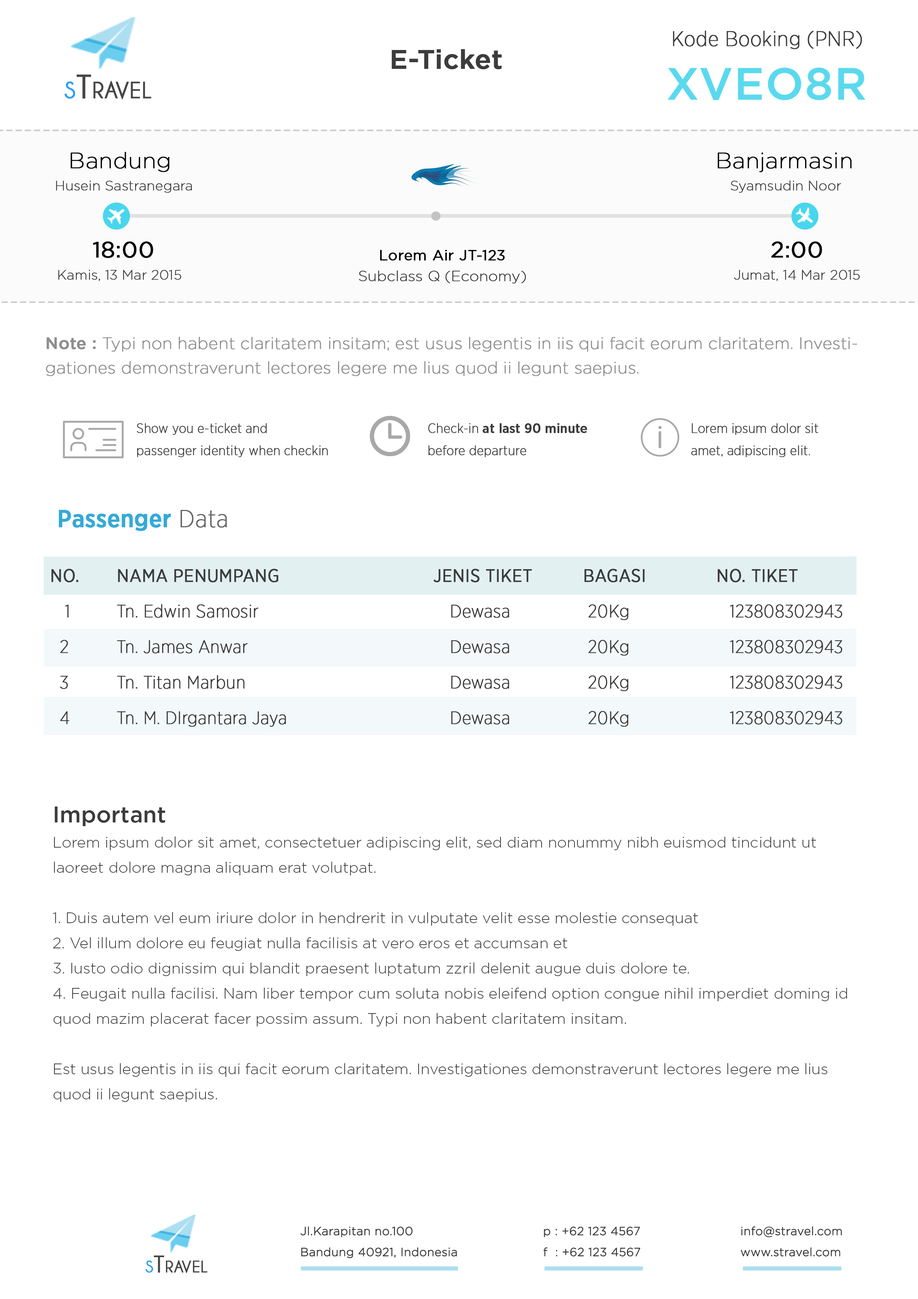
<style>
.page{position:relative;width:918px;height:1299px;background:#ffffff}
.page>*{position:absolute;margin:0}
.t1{font:20.9px/26.9px "GothamNarrow-XLight";color:#3c3c3c;font-weight:bold}
.t2{font:44.8px/53.7px "Gotham-Medium";color:#5ad9ee;font-weight:bold}
.t3{font:26.7px "Gotham-Medium";color:#3c3c3c;font-weight:bold}
.t4{font:31.8px "CaviarDreams-Bold";color:#464646;font-variant:small-caps;font-weight:bold}
.t5{font:31.8px "CaviarDreams-Bold";color:#2da0f1;font-variant:small-caps;font-weight:bold}
.t6{font:13.3px/22.2px "Gotham-ExtraLight";color:#3c3c3c;font-weight:bold}
.t7{font:22.2px/24.5px "Gotham-ExtraLight";color:#000000;font-weight:bold}
.t8{font:22.2px/30.6px "Gotham-Book";color:#000000;font-weight:bold}
.t9{font:22.2px/22.2px "Gotham-Book";color:#000000;font-weight:bold}
.t10{font:14.4px/20.7px "Gotham-ExtraLight";color:#3c3c3c;font-weight:bold}
.t11{font:14.4px/20.7px "Gotham-Book";color:#000000;font-weight:bold}
.t12{font:16.2px/24.2px "Gotham-ExtraLight";color:#8e8e8e;font-weight:bold}
.t13{font:16.2px/24.2px "Gotham-Medium";color:#8e8e8e;font-weight:bold}
.t14{font:13.3px/22.2px "GothamNarrow-XLight";color:#3c3c3c;font-weight:bold}
.t15{font:13.3px/22.2px "GothamNarrow-Medium";color:#3c3c3c;font-weight:bold}
.t16{font:24.4px "GothamNarrow-Medium";color:#34aad7;font-weight:bold}
.t17{font:24.4px "GothamNarrow-XLight";color:#676767;font-weight:bold}
.t18{font:17.8px/35.5px "GothamNarrow-XLight";color:#3c3c3c;font-weight:bold}
.t19{font:17.8px/35.5px "GothamNarrow-Book";color:#3c3c3c;text-transform:uppercase;font-weight:bold}
.t20{font:15.1px/25.2px "Gotham-Light";color:#3c3c3c}
.t21{font:22.6px/25.2px "Gotham-Medium";color:#3c3c3c}
.t22{font:11.6px/21px "Gotham-Light";color:#3c3c3c;font-weight:bold}
.t23{font:22.8px "CaviarDreams-Bold";color:#464646;font-variant:small-caps;font-weight:bold}
.t24{font:22.8px "CaviarDreams-Bold";color:#2da0f1;font-variant:small-caps;font-weight:bold}
</style>
<div class="page">
<p class="t1" style="left:668px;top:30px;width:198px;height:70px;text-align:center">Kode Booking (PNR)<br><span class="t2">XVEO8R</span></p>
<p class="t3" style="left:392px;top:49px;width:110px;height:20px">E-Ticket</p>
<p class="t4" style="left:64px;top:74px;width:87px;height:25px"><span class="t5">s</span>Travel</p>
<p class="t6" style="left:56px;top:152px;width:796px;height:41px"><span class="t7">  Bandung                       Banjarmasin<br></span>Husein Sastranegara                 Syamsudin Noor</p>
<p class="t6" style="left:58px;top:241px;width:802px;height:40px"><span class="t7"><br>        </span><span class="t8">18:0</span><span class="t9">0                              2:00 <br></span>     Kamis, 13 Mar 2015                Jumat, 14 Mar 2015</p>
<p class="t10" style="left:359px;top:250px;width:167px;height:34px;text-align:center"><span class="t11">Lorem Air JT-123<br></span>Subclass Q (Economy)</p>
<p class="t12" style="left:46px;top:337px;width:811px;height:39px"><span class="t13">Note : </span>Typi non habent claritatem insitam; est usus legentis in iis qui facit eorum claritatem. Investigationes demonstraverunt lectores legere me lius quod ii legunt saepius.</p>
<p class="t14" style="left:137px;top:423px;width:191px;height:34px">Show you e-ticket and passenger identity when checkin</p>
<p class="t15" style="left:428px;top:423px;width:159px;height:34px"><span class="t14">Check-in </span>at last 90 minute<br><span class="t14">before departure</span></p>
<p class="t14" style="left:691px;top:423px;width:128px;height:34px">Lorem ipsum dolor sit amet, adipiscing elit.</p>
<p class="t16" style="left:59px;top:510px;width:168px;height:21px">Passenger <span class="t17">Data</span></p>
<p class="t18" style="left:51px;top:569px;width:792px;height:158px"><span class="t19">No.   Nama Penumpang             Jenis TIket    Bagasi      No. TIket<br></span>   1    Tn. Edwin Samosir               Dewasa       20Kg        123808302943<br>  2    Tn. James Anwar                Dewasa       20Kg        123808302943<br>  3    Tn. Titan Marbun                Dewasa       20Kg        123808302943<br>  4    Tn. M. DIrgantara Jaya             Dewasa       20Kg        123808302943</p>
<p class="t20" style="left:53px;top:806px;width:794px;height:296px"><span class="t21">Important<br></span>Lorem ipsum dolor sit amet, consectetuer adipiscing elit, sed diam nonummy nibh euismod tincidunt ut laoreet dolore magna aliquam erat volutpat. <br><br>1. Duis autem vel eum iriure dolor in hendrerit in vulputate velit esse molestie consequat <br>2. Vel illum dolore eu feugiat nulla facilisis at vero eros et accumsan et <br>3. Iusto odio dignissim qui blandit praesent luptatum zzril delenit augue duis dolore te. <br>4. Feugait nulla facilisi. Nam liber tempor cum soluta nobis eleifend option congue nihil imperdiet doming id quod mazim placerat facer possim assum. Typi non habent claritatem insitam. <br><br>Est usus legentis in iis qui facit eorum claritatem. Investigationes demonstraverunt lectores legere me lius quod ii legunt saepius.</p>
<p class="t22" style="left:300px;top:1226px;width:157px;height:32px">Jl.Karapitan no.100<br>Bandung 40921, Indonesia</p>
<p class="t22" style="left:543px;top:1226px;width:97px;height:30px">p : +62 123 4567<br>f  : +62 123 4567</p>
<p class="t22" style="left:741px;top:1226px;width:101px;height:30px">info@stravel.com<br>www.stravel.com</p>
<p class="t23" style="left:145px;top:1255px;width:62px;height:18px"><span class="t24">s</span>Travel</p>
</div>
